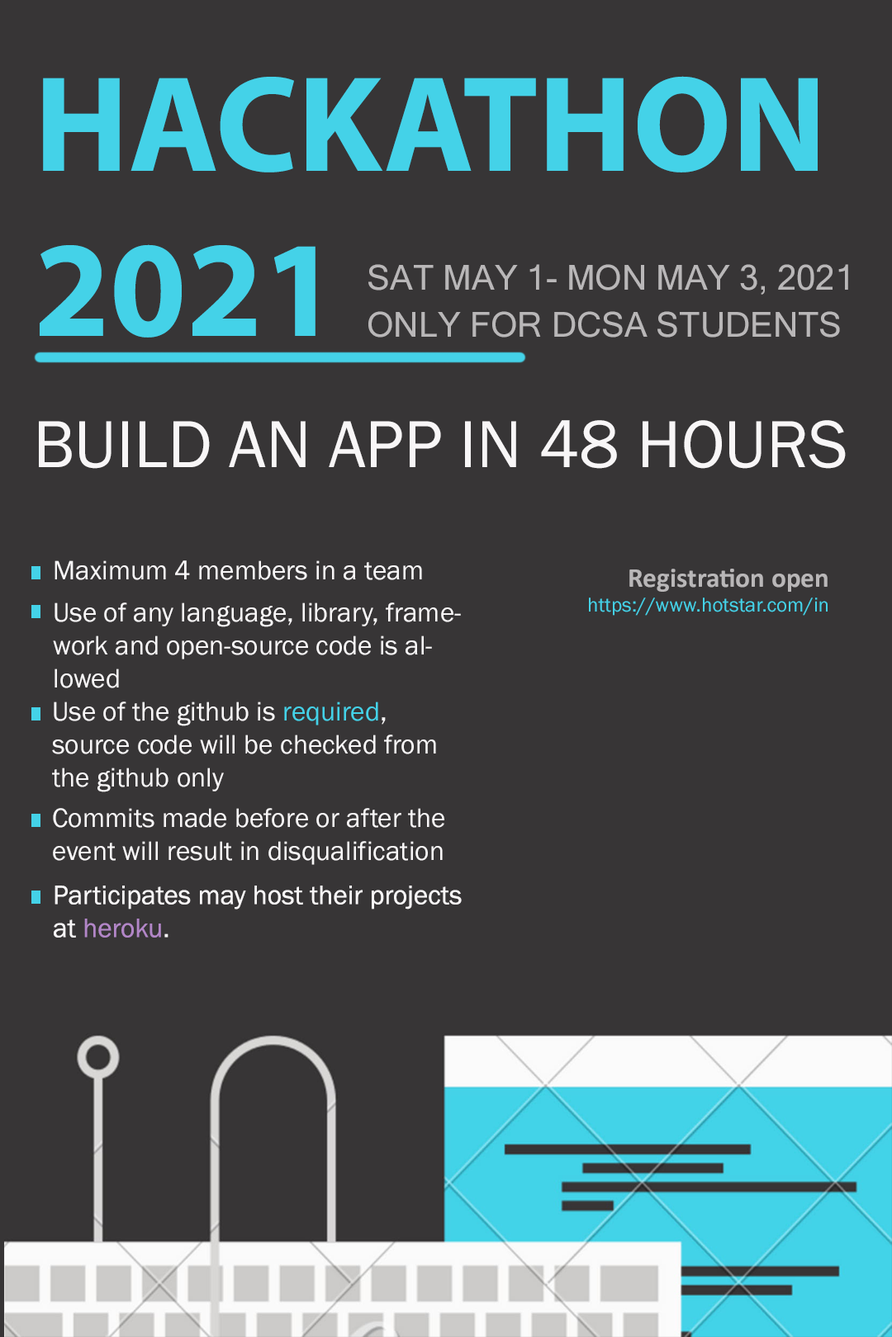
<style>
.page{position:relative;width:892px;height:1337px;background:#373536}
.page>*{position:absolute;margin:0}
.t1{font:137.6px "MyriadPro-Bold";color:#44d2e8}
.t2{font:34.4px "MicrosoftSansSerif";color:#b9b7b8}
.t3{font:68.8px "FranklinGothic-Book";color:#f8f6f7}
.t4{font:27.5px "FranklinGothic-Book";color:#f8f6f7}
.t5{font:27.5px "Calibri-Bold";color:#b9b7b8}
.t6{font:20.6px "FranklinGothic-Book";color:#44d2e8}
.t7{font:27.5px "FranklinGothic-Book";color:#44d2e8}
.t8{font:27.5px "FranklinGothic-Book";color:#b286c7}
</style>
<div class="page">
<p class="t1" style="left:40px;top:76px;width:777px;height:262px">HACKATHON 2021</p>
<p class="t2" style="left:368px;top:264px;width:480px;height:31px">SAT MAY 1- MON MAY 3, 2021</p>
<p class="t2" style="left:368px;top:311px;width:472px;height:27px">ONLY FOR DCSA STUDENTS</p>
<p class="t3" style="left:39px;top:420px;width:806px;height:49px">BUILD AN APP IN 48 HOURS</p>
<p class="t4" style="left:54px;top:561px;width:368px;height:19px">Maximum 4 members in a team</p>
<p class="t5" style="left:629px;top:569px;width:198px;height:23px">Registration open</p>
<p class="t4" style="left:53px;top:603px;width:408px;height:86px">Use of any language, library, framework and open-source code is allowed</p>
<p class="t6" style="left:589px;top:598px;width:238px;height:18px">https://www.hotstar.com/in</p>
<p class="t4" style="left:52px;top:702px;width:384px;height:91px">Use of the github is <span class="t7">required</span>, source code will be checked from the github only</p>
<p class="t4" style="left:53px;top:808px;width:391px;height:57px">Commits made before or after the event will result in disqualification</p>
<p class="t4" style="left:54px;top:886px;width:407px;height:52px">Participates may host their projects at <span class="t8">heroku</span>.</p>
</div>
